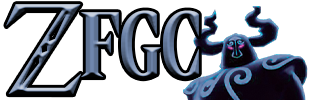
<style>
.page{position:relative;width:318px;height:100px;background:#ffffff}
.page>*{position:absolute;margin:0}
.t1{font:107.4px "Triforce"}
.t2{font:103.8px "Triforce"}
</style>
<div class="page">
<p class="t1" style="left:6px;top:4px;width:193px;height:91px"><span class="t2">Z</span>fgc</p>
</div>
